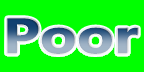
<style>
.page{position:relative;width:144px;height:72px;background:#00ff00}
.page>*{position:absolute;margin:0}
.t1{font:49.7px "Ebrima-Bold";scale:1.22 1}
</style>
<div class="page">
<p class="t1" style="left:7px;top:18px;width:131px;height:36px">Poor</p>
</div>
